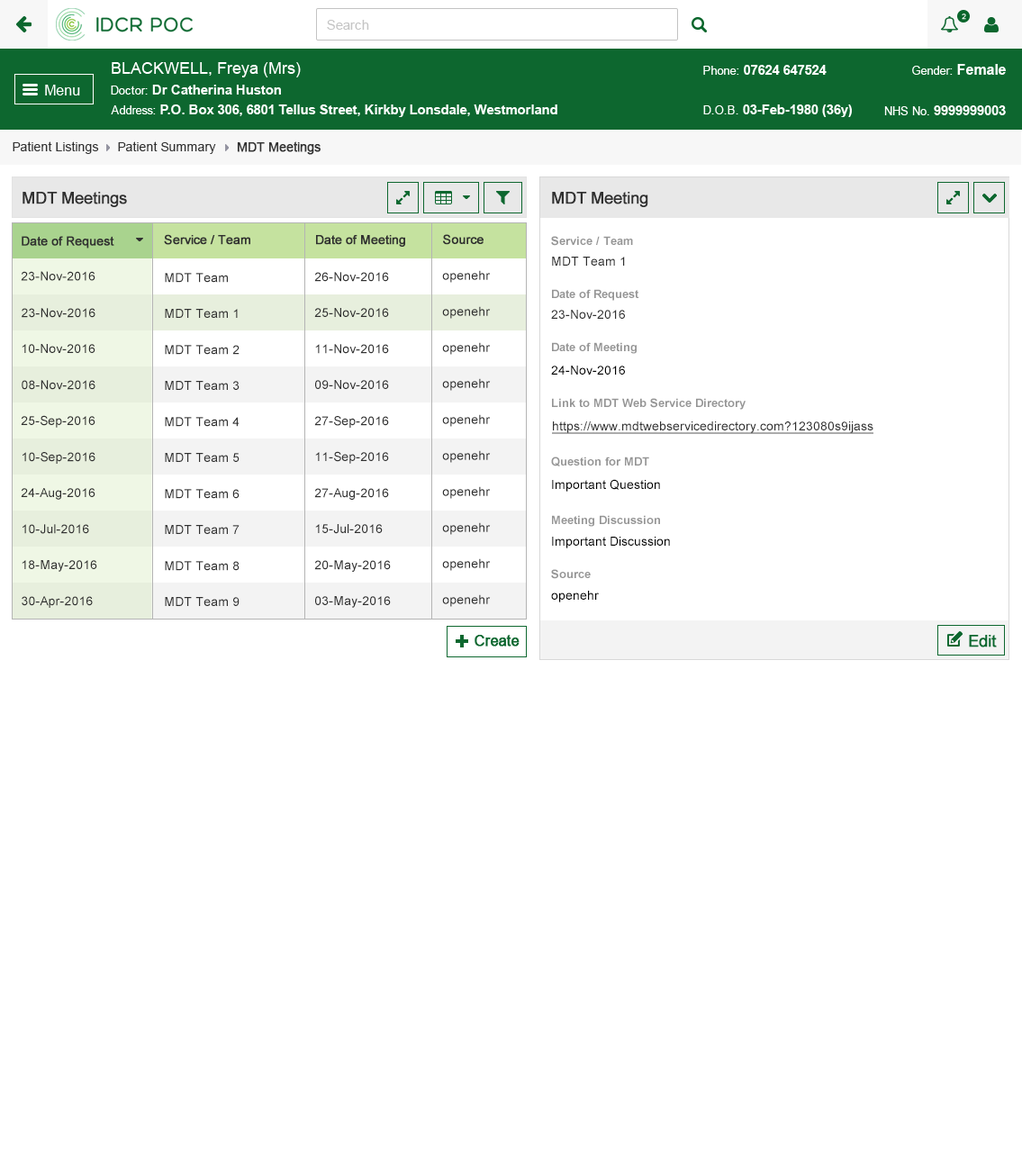
<style>
.page{position:relative;width:1022px;height:1167px;background:#ffffff}
.page>*{position:absolute;margin:0}
.t1{font:12.6px "ArialMT";color:#313131}
.t2{font:12.6px "ArialMT";color:#313131;font-weight:bold}
.t3{font:16.2px "ArialMT";color:#303030;font-weight:bold}
.t4{font:12.6px "ArialMT";color:#303030;font-weight:bold}
.t5{font:11.7px "Arial-BoldMT";color:#959595}
.t6{font:12.6px "ArialMT";color:#303030}
.t7{font:12.6px "ArialMT";color:#000000}
.t8{font:12.6px "ArialMT";color:#303030;text-decoration:underline}
</style>
<div class="page">
<p class="t1" style="left:13px;top:141px;width:86px;height:13px">Patient Listings</p>
<p class="t1" style="left:118px;top:141px;width:98px;height:13px">Patient Summary</p>
<p class="t2" style="left:237px;top:141px;width:84px;height:14px">MDT Meetings</p>
<p class="t3" style="left:23px;top:192px;width:104px;height:15px">MDT Meetings</p>
<p class="t3" style="left:552px;top:192px;width:96px;height:15px">MDT Meeting</p>
<p class="t4" style="left:22px;top:236px;width:92px;height:12px">Date of Request</p>
<p class="t4" style="left:164px;top:234px;width:86px;height:11px">Service / Team</p>
<p class="t4" style="left:316px;top:235px;width:89px;height:12px">Date of Meeting</p>
<p class="t4" style="left:443px;top:234px;width:40px;height:11px">Source</p>
<p class="t5" style="left:551px;top:236px;width:82px;height:10px">Service / Team</p>
<p class="t6" style="left:552px;top:257px;width:73px;height:9px">MDT Team 1</p>
<p class="t6" style="left:21px;top:271px;width:74px;height:10px">23-Nov-2016</p>
<p class="t6" style="left:165px;top:273px;width:63px;height:10px">MDT Team</p>
<p class="t6" style="left:314px;top:272px;width:75px;height:10px">26-Nov-2016</p>
<p class="t6" style="left:442px;top:270px;width:49px;height:13px">openehr</p>
<p class="t5" style="left:552px;top:289px;width:87px;height:12px">Date of Request</p>
<p class="t6" style="left:22px;top:308px;width:73px;height:10px">23-Nov-2016</p>
<p class="t6" style="left:165px;top:309px;width:73px;height:9px">MDT Team 1</p>
<p class="t6" style="left:314px;top:308px;width:75px;height:9px">25-Nov-2016</p>
<p class="t6" style="left:442px;top:306px;width:49px;height:13px">openehr</p>
<p class="t6" style="left:551px;top:310px;width:74px;height:9px">23-Nov-2016</p>
<p class="t6" style="left:22px;top:344px;width:73px;height:9px">10-Nov-2016</p>
<p class="t6" style="left:165px;top:345px;width:74px;height:10px">MDT Team 2</p>
<p class="t6" style="left:315px;top:344px;width:74px;height:10px">11-Nov-2016</p>
<p class="t6" style="left:442px;top:342px;width:49px;height:13px">openehr</p>
<p class="t5" style="left:552px;top:342px;width:85px;height:12px">Date of Meeting</p>
<p class="t7" style="left:551px;top:366px;width:74px;height:9px">24-Nov-2016</p>
<p class="t6" style="left:22px;top:380px;width:73px;height:10px">08-Nov-2016</p>
<p class="t6" style="left:165px;top:381px;width:74px;height:9px">MDT Team 3</p>
<p class="t6" style="left:315px;top:380px;width:74px;height:9px">09-Nov-2016</p>
<p class="t6" style="left:442px;top:378px;width:49px;height:13px">openehr</p>
<p class="t5" style="left:552px;top:398px;width:193px;height:12px">Link to MDT Web Service Directory</p>
<p class="t6" style="left:21px;top:415px;width:74px;height:13px">25-Sep-2016</p>
<p class="t6" style="left:165px;top:417px;width:74px;height:10px">MDT Team 4</p>
<p class="t6" style="left:314px;top:416px;width:75px;height:12px">27-Sep-2016</p>
<p class="t6" style="left:442px;top:414px;width:49px;height:13px">openehr</p>
<p class="t8" style="left:552px;top:421px;width:321px;height:13px">https://www.mdtwebservicedirectory.com?123080s9ijass</p>
<p class="t6" style="left:23px;top:452px;width:72px;height:12px">10-Sep-2016</p>
<p class="t6" style="left:165px;top:453px;width:74px;height:9px">MDT Team 5</p>
<p class="t6" style="left:315px;top:451px;width:74px;height:13px">11-Sep-2016</p>
<p class="t6" style="left:442px;top:450px;width:49px;height:13px">openehr</p>
<p class="t5" style="left:551px;top:456px;width:98px;height:10px">Question for MDT</p>
<p class="t7" style="left:552px;top:479px;width:108px;height:13px">Important Question</p>
<p class="t6" style="left:21px;top:488px;width:74px;height:12px">24-Aug-2016</p>
<p class="t6" style="left:165px;top:489px;width:74px;height:10px">MDT Team 6</p>
<p class="t6" style="left:314px;top:488px;width:75px;height:12px">27-Aug-2016</p>
<p class="t6" style="left:442px;top:486px;width:49px;height:13px">openehr</p>
<p class="t5" style="left:552px;top:515px;width:108px;height:12px">Meeting Discussion</p>
<p class="t6" style="left:23px;top:524px;width:66px;height:10px">10-Jul-2016</p>
<p class="t6" style="left:165px;top:525px;width:74px;height:9px">MDT Team 7</p>
<p class="t6" style="left:315px;top:524px;width:68px;height:10px">15-Jul-2016</p>
<p class="t6" style="left:442px;top:522px;width:49px;height:13px">openehr</p>
<p class="t7" style="left:552px;top:537px;width:118px;height:11px">Important Discussion</p>
<p class="t6" style="left:22px;top:560px;width:75px;height:12px">18-May-2016</p>
<p class="t6" style="left:165px;top:561px;width:74px;height:10px">MDT Team 8</p>
<p class="t6" style="left:314px;top:560px;width:77px;height:12px">20-May-2016</p>
<p class="t6" style="left:442px;top:558px;width:49px;height:13px">openehr</p>
<p class="t5" style="left:551px;top:569px;width:40px;height:10px">Source</p>
<p class="t7" style="left:551px;top:591px;width:48px;height:11px">openehr</p>
<p class="t6" style="left:22px;top:596px;width:71px;height:12px">30-Apr-2016</p>
<p class="t6" style="left:165px;top:597px;width:74px;height:9px">MDT Team 9</p>
<p class="t6" style="left:315px;top:596px;width:76px;height:12px">03-May-2016</p>
<p class="t6" style="left:442px;top:594px;width:49px;height:13px">openehr</p>
</div>
